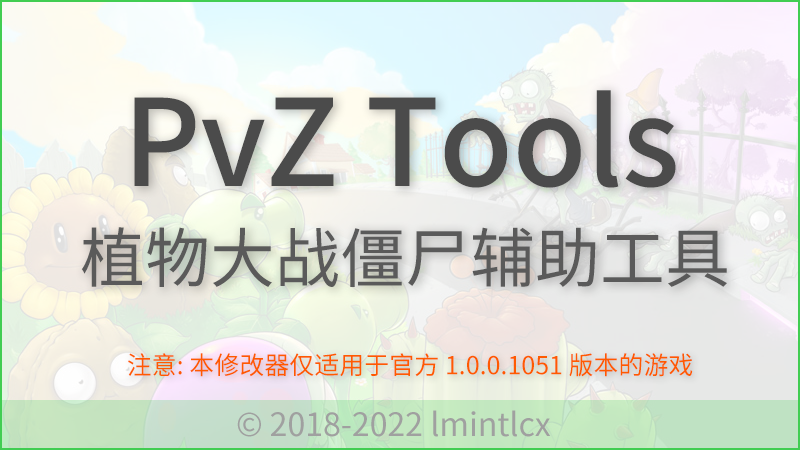
<style>
.page{position:relative;width:800px;height:450px}
.page>*{position:absolute;margin:0}
.t1{font:120px "NotoSansCJKsc-Medium";color:#4b4b4b}
.t2{font:65px "NotoSansCJKsc-Regular";color:#5a5a5a}
.t3{font:25px "NotoSansCJKsc-Regular";color:#ff5a00}
.t4{font:32px "NotoSansCJKsc-Regular";color:#a0a0a0}
</style>
<div class="page">
<p class="t1" style="left:134px;top:90px;width:542px;height:98px">PvZ Tools</p>
<p class="t2" style="left:81px;top:227px;width:646px;height:60px">植物大战僵尸辅助工具</p>
<p class="t3" style="left:128px;top:353px;width:565px;height:24px">注意: 本修改器仅适用于官方 1.0.0.1051 版本的游戏</p>
<p class="t4" style="left:237px;top:410px;width:314px;height:27px">© 2018-2022 lmintlcx</p>
</div>
